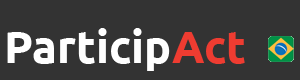
<style>
.page{position:relative;width:300px;height:80px;background:#333333}
.page>*{position:absolute;margin:0}
.t1{font:45px "Ubuntu-Bold";color:#ffffff}
.t2{font:45px "Ubuntu-Bold";color:#ee3c31}
</style>
<div class="page">
<p class="t1" style="left:7px;top:28px;width:238px;height:43px">Particip<span class="t2">Act</span></p>
</div>
